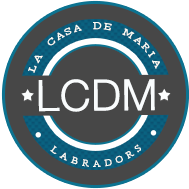
<style>
.page{position:relative;width:189px;height:189px;background:#474747}
.page>*{position:absolute;margin:0}
.t1{font:8.5px "Georgia";letter-spacing:0.198em;color:#fbfbf4;text-transform:uppercase}
.t2{font:42.6px "HelveticaNeue-Light";color:#f9fcfd;font-weight:bold}
.t3{font:8.5px "TimesNewRomanPSMT";letter-spacing:0.45em;color:#fbfbf4;text-transform:uppercase}
</style>
<div class="page">
<p class="t1" style="left:28px;top:22px;width:132px;height:51px;rotate:-1deg">La  casa  de  Maria</p>
<p class="t2" style="left:38px;top:79px;width:117px;height:33px">LCDM</p>
<p class="t3" style="left:50px;top:144px;width:91px;height:23px;rotate:-3deg">LABRADORS</p>
</div>
